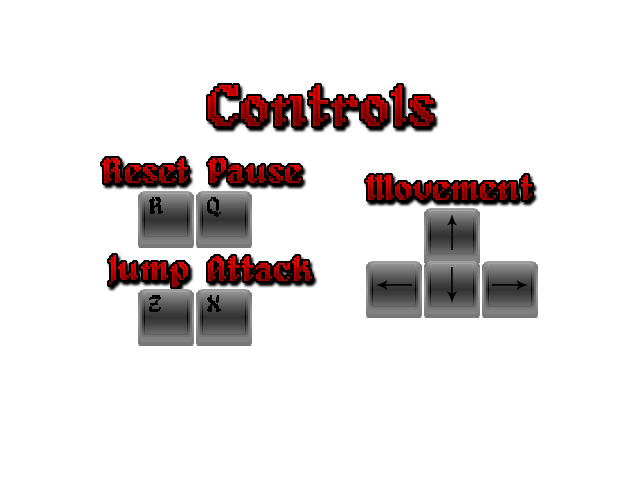
<style>
.page{position:relative;width:640px;height:480px;background:#ffffff}
.page>*{position:absolute;margin:0}
.t1{font:60px "Alagard"}
.t2{font:36px "Alagard"}
.t3{font:24px "Alagard";color:#000000}
</style>
<div class="page">
<p class="t1" style="left:208px;top:85px;width:225px;height:41px">Controls</p>
<p class="t2" style="left:102px;top:158px;width:86px;height:25px">Reset</p>
<p class="t2" style="left:208px;top:158px;width:93px;height:25px">Pause</p>
<p class="t2" style="left:366px;top:175px;width:166px;height:25px">Movement</p>
<p class="t3" style="left:149px;top:197px;width:14px;height:17px">R</p>
<p class="t3" style="left:207px;top:197px;width:14px;height:20px">Q</p>
<p class="t2" style="left:109px;top:255px;width:79px;height:32px">Jump</p>
<p class="t2" style="left:208px;top:256px;width:104px;height:25px">Attack</p>
<p class="t3" style="left:149px;top:295px;width:12px;height:17px">Z</p>
<p class="t3" style="left:207px;top:295px;width:14px;height:17px">X</p>
</div>
